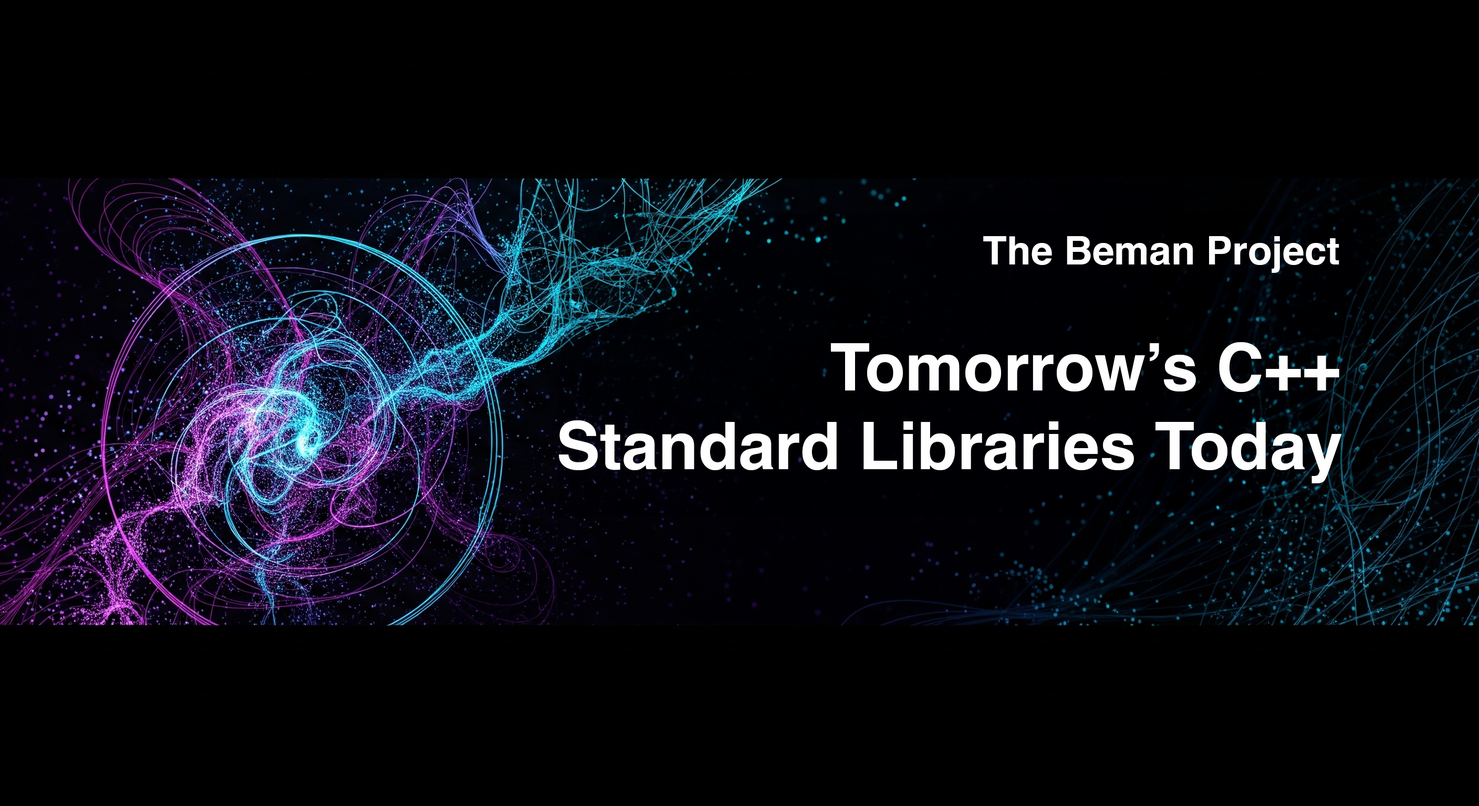
<style>
.page{position:relative;width:1479px;height:806px;background:#000000}
.page>*{position:absolute;margin:0}
.t1{font:65.6px "Helvetica-Bold";color:#fffefe}
.t2{font:39.4px "Helvetica-Bold";color:#fffefe}
</style>
<div class="page">
<p class="t1" style="left:559px;top:236px;width:783px;height:248px"><span class="t2">                                       The Beman Project<br><br></span>               Tomorrow’s C++<br>Standard Libraries Today                   <br><span class="t2"></span></p>
</div>
